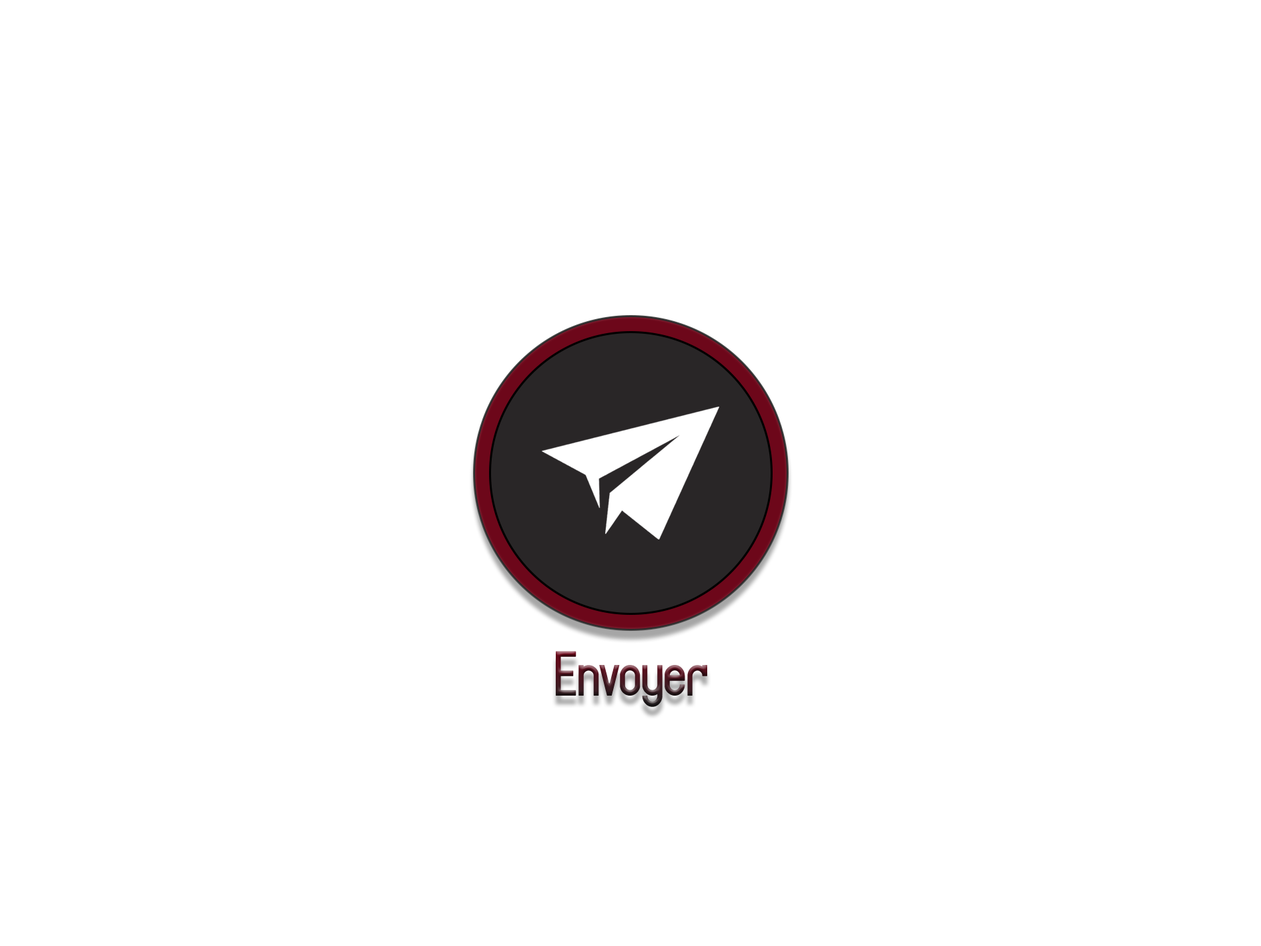
<style>
.page{position:relative;width:1261px;height:946px;background:#ffffff}
.page>*{position:absolute;margin:0}
.t1{font:55.6px "Targa";scale:0.9 1}
</style>
<div class="page">
<p class="t1" style="left:556px;top:651px;width:151px;height:56px">Envoyer</p>
</div>
